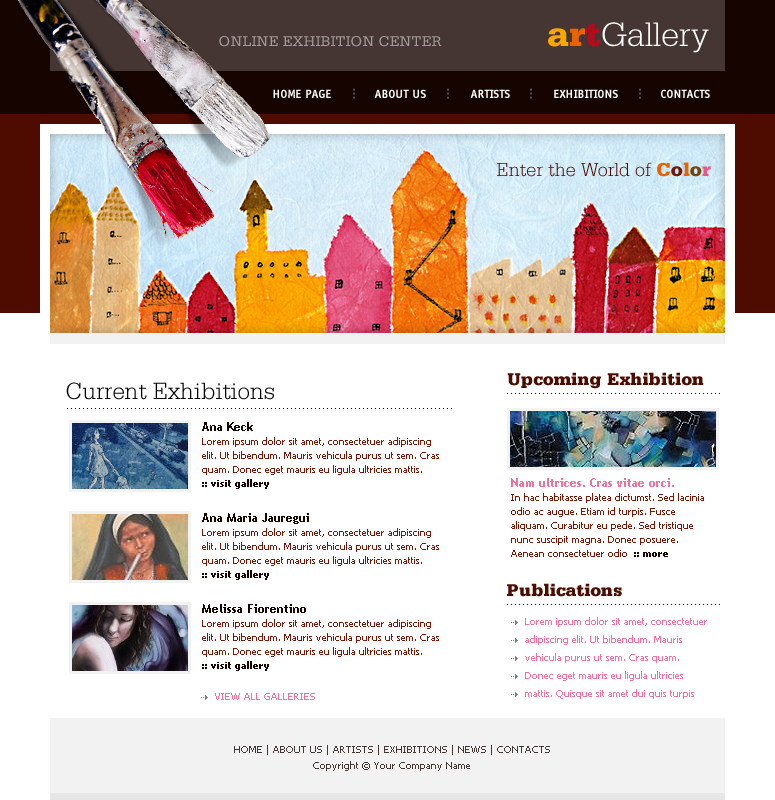
<style>
.page{position:relative;width:775px;height:800px;background:#ffffff}
.page>*{position:absolute;margin:0}
.t1{font:36px "SerifaStd-Light";color:#ffffff}
.t2{font:36px "SerifaStd-Black";color:#faa701}
.t3{font:36px "SerifaStd-Black";color:#ea6303}
.t4{font:36px "SerifaStd-Black";color:#b10c1b}
.t5{font:15px "SerifaStd-Roman";color:#a29b99;text-transform:uppercase}
.t6{font:12px "OffensiveBoldBold";color:#ffffff}
.t7{font:12px "OffensiveBoldBold";color:#5c504d}
.t8{font:19.9px "SerifaStd-Light";color:#4e0c00}
.t9{font:19.9px "SerifaStd-Black";color:#ea6303}
.t10{font:19.9px "SerifaStd-Black";color:#741907}
.t11{font:19.9px "SerifaStd-Black";color:#6d470f}
.t12{font:19.9px "SerifaStd-Black";color:#e75884}
.t13{font:18px "SerifaStd-Black";color:#4e0c00}
.t14{font:24.7px "SerifaStd-Light";color:#000000}
.t15{font:10px "TrebuchetMS-Bold";color:#000000}
.t16{font:10px/14px "Tahoma";color:#741907}
.t17{font:12px/12px "TrebuchetMS-Bold";color:#160400}
.t18{font:10px/14px "Tahoma-Bold";color:#160400}
.t19{font:12px/12px "TrebuchetMS-Bold";color:#f1719a}
.t20{font:10px/18px "Tahoma";color:#f1719a}
.t21{font:10px "Tahoma";color:#f1719a}
.t22{font:10px/16px "Tahoma";color:#453633}
</style>
<div class="page">
<p class="t1" style="left:548px;top:22px;width:161px;height:31px"><span class="t2">a</span><span class="t3">r</span><span class="t4">t</span>Gallery</p>
<p class="t5" style="left:219px;top:36px;width:223px;height:11px">online exhibition center</p>
<p class="t6" style="left:273px;top:89px;width:58px;height:9px">HOME PAGE</p>
<p class="t7" style="left:353px;top:88px;width:2px;height:11px;rotate:90deg">...</p>
<p class="t6" style="left:374px;top:89px;width:52px;height:9px">ABOUT US</p>
<p class="t7" style="left:447px;top:88px;width:2px;height:11px;rotate:90deg">...</p>
<p class="t6" style="left:470px;top:89px;width:40px;height:9px">ARTISTS</p>
<p class="t7" style="left:530px;top:88px;width:2px;height:11px;rotate:90deg">...</p>
<p class="t6" style="left:554px;top:89px;width:64px;height:9px">EXHIBITIONS</p>
<p class="t7" style="left:639px;top:88px;width:2px;height:11px;rotate:90deg">...</p>
<p class="t6" style="left:661px;top:89px;width:49px;height:9px">CONTACTS</p>
<p class="t8" style="left:497px;top:162px;width:214px;height:15px">Enter the World of <span class="t9">C</span><span class="t10">o</span><span class="t9">l</span><span class="t11">o</span><span class="t12">r</span></p>
<p class="t13" style="left:507px;top:372px;width:197px;height:17px">Upcoming Exhibition</p>
<p class="t14" style="left:66px;top:382px;width:208px;height:18px">Current Exhibitions</p>
<p class="t15" style="left:507px;top:393px;width:213px;height:1px">......................................................</p>
<p class="t15" style="left:67px;top:408px;width:385px;height:1px">.................................................................................................</p>
<p class="t16" style="left:202px;top:422px;width:237px;height:67px"><span class="t17">Ana Keck<br></span>Lorem ipsum dolor sit amet, consectetuer adipiscing elit. Ut bibendum. Mauris vehicula purus ut sem. Cras quam. Donec eget mauris eu ligula ultricies mattis.<br><span class="t18">:: visit gallery</span></p>
<p class="t16" style="left:511px;top:478px;width:193px;height:79px"><span class="t19">Nam ultrices. Cras vitae orci. <br></span>In hac habitasse platea dictumst. Sed lacinia odio ac augue. Etiam id turpis. Fusce aliquam. Curabitur eu pede. Sed tristique nunc suscipit magna. Donec posuere. Aenean consectetuer odio  <span class="t18">:: more</span></p>
<p class="t16" style="left:202px;top:513px;width:237px;height:67px"><span class="t17">Ana Maria Jauregui<br></span>Lorem ipsum dolor sit amet, consectetuer adipiscing elit. Ut bibendum. Mauris vehicula purus ut sem. Cras quam. Donec eget mauris eu ligula ultricies mattis.<br><span class="t18">:: visit gallery</span></p>
<p class="t13" style="left:507px;top:583px;width:115px;height:14px">Publications</p>
<p class="t16" style="left:202px;top:604px;width:237px;height:67px"><span class="t17">Melissa Fiorentino<br></span>Lorem ipsum dolor sit amet, consectetuer adipiscing elit. Ut bibendum. Mauris vehicula purus ut sem. Cras quam. Donec eget mauris eu ligula ultricies mattis.<br><span class="t18">:: visit gallery</span></p>
<p class="t15" style="left:507px;top:604px;width:213px;height:1px">......................................................</p>
<p class="t20" style="left:525px;top:617px;width:182px;height:82px">Lorem ipsum dolor sit amet, consectetuer adipiscing elit. Ut bibendum. Mauris vehicula purus ut sem. Cras quam. Donec eget mauris eu ligula ultricies mattis. Quisque sit amet dui quis turpis</p>
<p class="t21" style="left:215px;top:693px;width:100px;height:7px">VIEW ALL GALLERIES</p>
<p class="t22" style="left:234px;top:745px;width:316px;height:26px;text-align:center">HOME | ABOUT US | ARTISTS | EXHIBITIONS | NEWS | CONTACTS<br>Copyright © Your Company Name</p>
</div>
